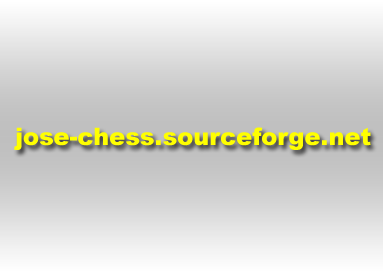
<style>
.page{position:relative;width:383px;height:272px}
.page>*{position:absolute;margin:0}
.t1{font:24px "Arial-Black";color:#ffff00}
</style>
<div class="page">
<p class="t1" style="left:14px;top:127px;width:357px;height:23px">jose-chess.sourceforge.net</p>
</div>
